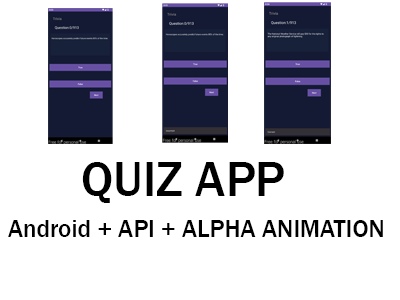
<style>
.page{position:relative;width:400px;height:300px;background:#ffffff}
.page>*{position:absolute;margin:0}
.t1{font:50px "FranklinGothic-Medium";color:#000000}
.t2{font:25px "FranklinGothic-Medium";color:#000000}
</style>
<div class="page">
<p class="t1" style="left:82px;top:162px;width:202px;height:41px">QUIZ APP</p>
<p class="t2" style="left:8px;top:220px;width:375px;height:17px">Android + API + ALPHA ANIMATION</p>
</div>
